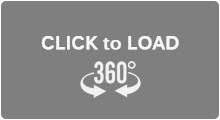
<style>
.page{position:relative;width:220px;height:120px;background:#7f7f7f}
.page>*{position:absolute;margin:0}
.t1{font:18px "Kalinga-Bold";color:#f6f6f6;font-weight:bold}
</style>
<div class="page">
<p class="t1" style="left:41px;top:36px;width:138px;height:14px">CLICK to LOAD</p>
</div>
